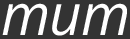
<style>
.page{position:relative;width:130px;height:39px;background:#333333}
.page>*{position:absolute;margin:0}
.t1{font:57.2px "OpenSans-Italic";letter-spacing:-0.022em;color:#ffffff}
</style>
<div class="page">
<p class="t1" style="left:2px;top:3px;width:125px;height:33px">mum</p>
</div>
